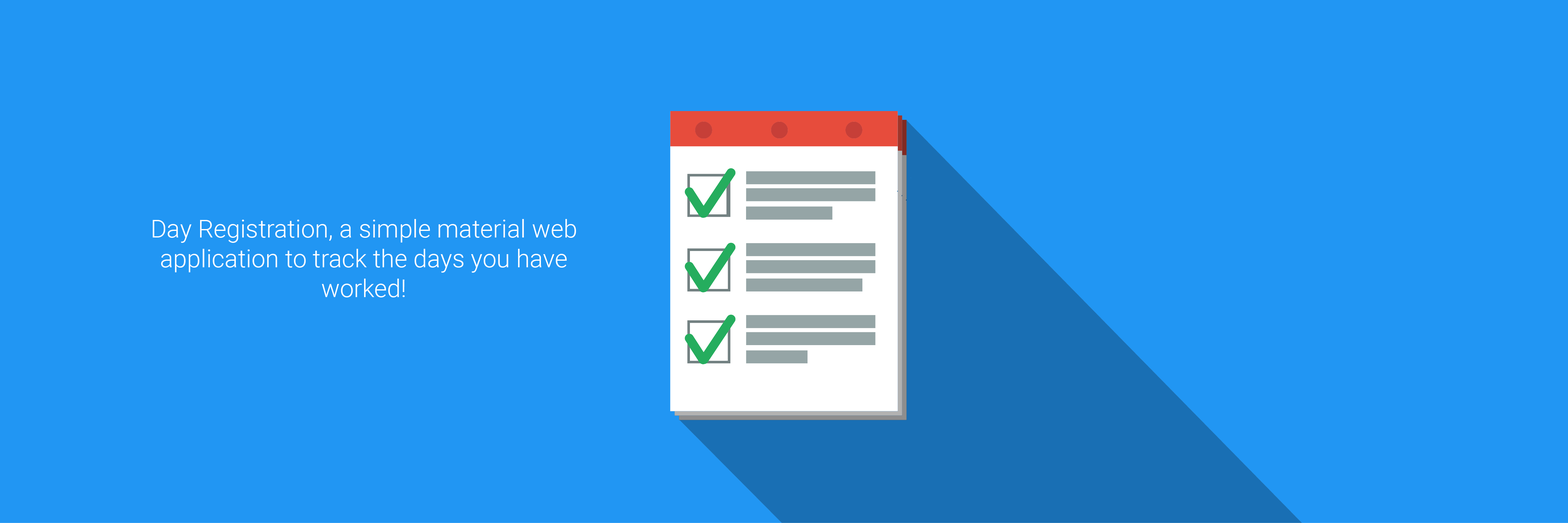
<style>
.page{position:relative;width:1568px;height:523px;background:#2196f3}
.page>*{position:absolute;margin:0}
.t1{font:24.8px "Roboto-Light";color:#ffffff}
</style>
<div class="page">
<p class="t1" style="left:153px;top:219px;width:423px;height:78px;text-align:center">Day Registration, a simple material web application to track the days you have worked!</p>
</div>
